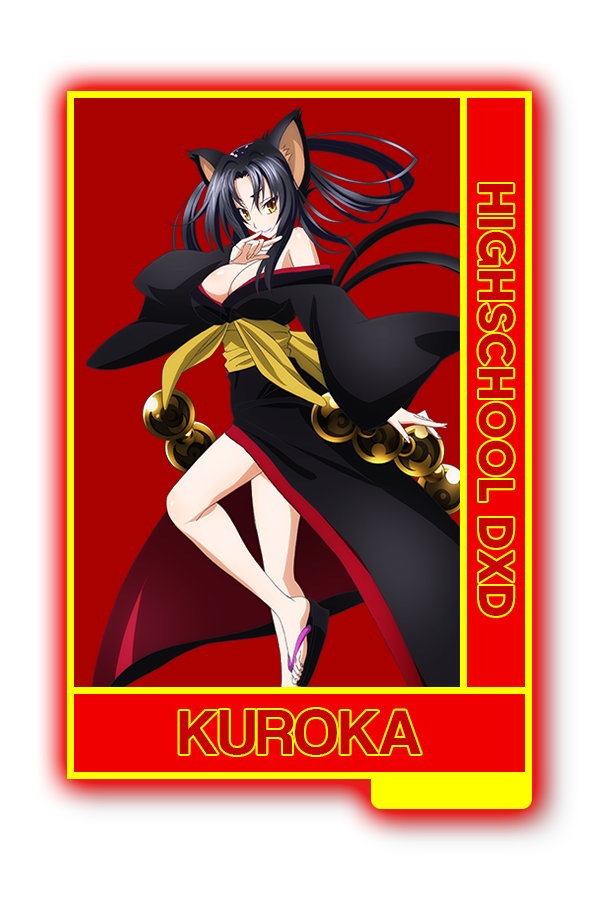
<style>
.page{position:relative;width:600px;height:900px;background:#ffffff}
.page>*{position:absolute;margin:0}
.t1{font:48.8px "MADETOMMY-Bold";color:#ca0000}
.t2{font:66px "CoolveticaRg-Regular";color:#ca0000}
</style>
<div class="page">
<p class="t1" style="left:478px;top:184px;width:36px;height:432px;rotate:90deg">HIGHSCHOOL DXD</p>
<p class="t2" style="left:179px;top:709px;width:242px;height:46px">KUROKA</p>
</div>
